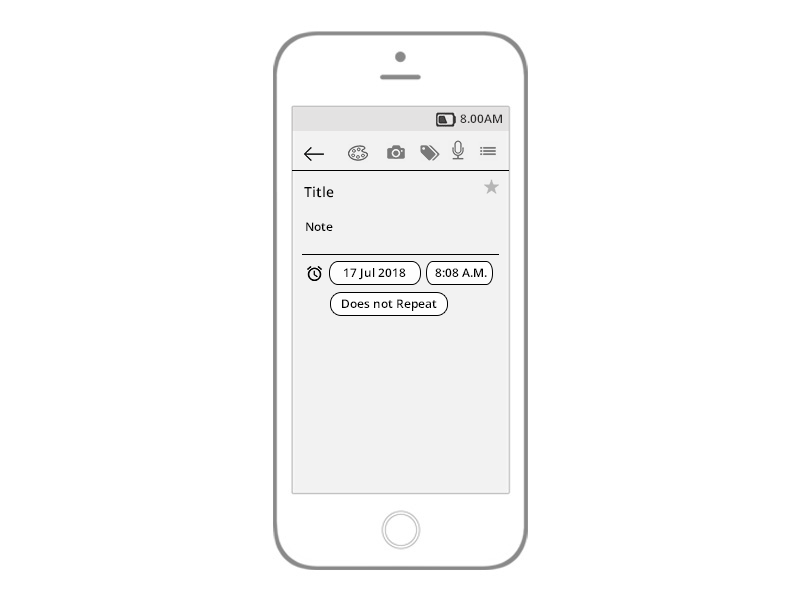
<style>
.page{position:relative;width:800px;height:600px;background:#ffffff}
.page>*{position:absolute;margin:0}
.t1{font:12px "OpenSans-Semibold";color:#2e2d2d}
.t2{font:14px "OpenSans-Semibold";color:#000000}
.t3{font:12px "OpenSans-Semibold";color:#000000}
</style>
<div class="page">
<p class="t1" style="left:460px;top:114px;width:42px;height:9px">8.00AM</p>
<p class="t2" style="left:304px;top:186px;width:30px;height:12px">Title</p>
<p class="t3" style="left:306px;top:222px;width:27px;height:9px">Note</p>
<p class="t3" style="left:344px;top:268px;width:62px;height:12px">17 Jul 2018</p>
<p class="t3" style="left:435px;top:268px;width:52px;height:9px">8:08 A.M.</p>
<p class="t3" style="left:342px;top:299px;width:95px;height:12px">Does not Repeat</p>
</div>
